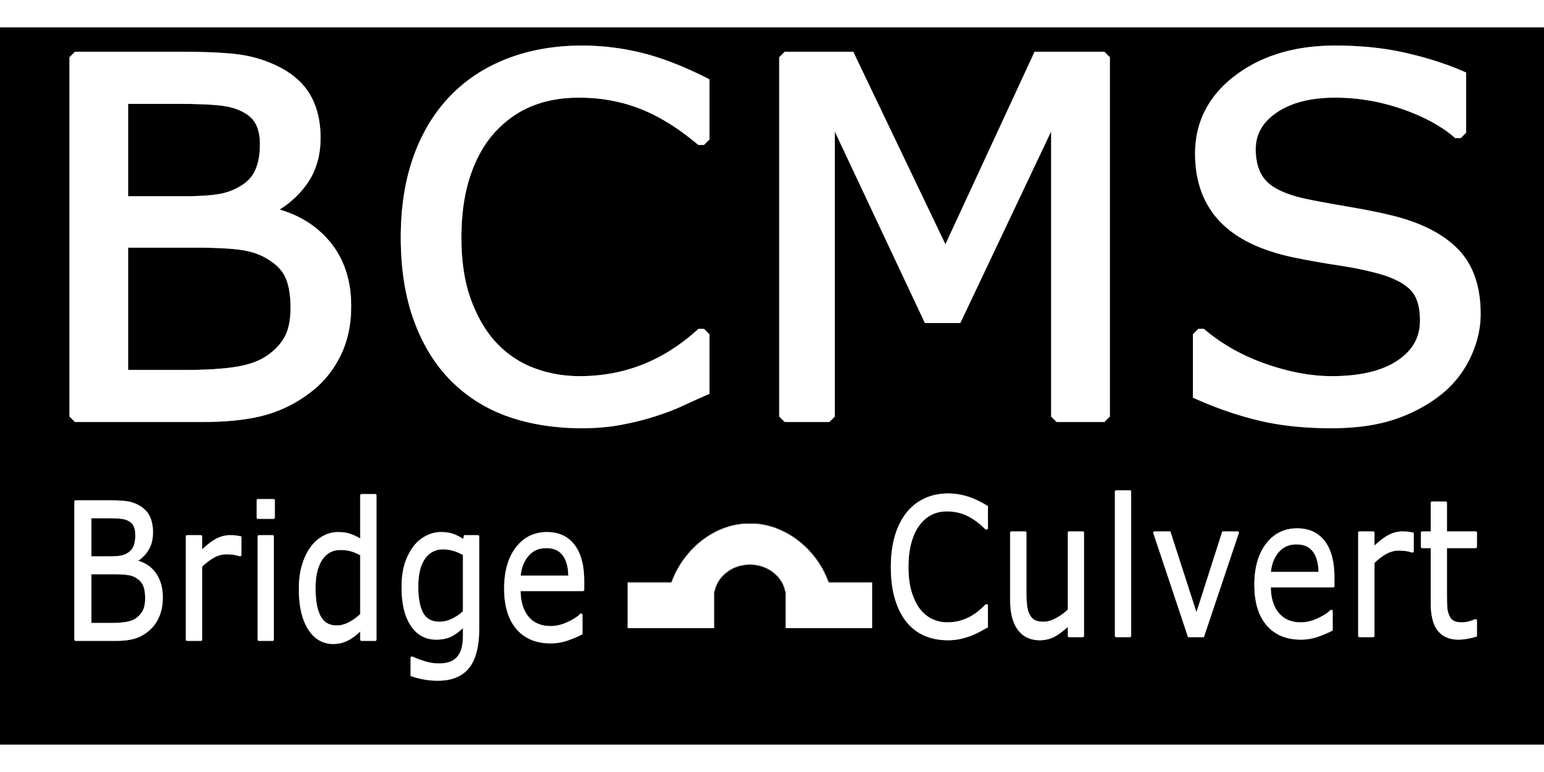
<style>
.page{position:relative;width:1544px;height:772px;background:#000000}
.page>*{position:absolute;margin:0}
.t1{font:493.8px "MSReferenceSansSerif";color:#ffffff;font-weight:bold}
.t2{font:191.2px "MSReferenceSansSerif";color:#ffffff;font-weight:bold;scale:0.83 1}
</style>
<div class="page">
<p class="t1" style="left:69px;top:45px;width:1412px;height:383px">BCMS</p>
<p class="t2" style="left:74px;top:494px;width:511px;height:187px">Bridge</p>
<p class="t2" style="left:890px;top:490px;width:588px;height:151px">Culvert</p>
</div>
